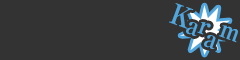
<style>
.page{position:relative;width:240px;height:60px;background:#333333}
.page>*{position:absolute;margin:0}
.t1{font:25.2px "RyuminPro-ExBold";letter-spacing:-0.08em;color:#50a6dd;scale:0.9 1}
.t2{font:28px "RyuminPro-ExBold";letter-spacing:-0.08em;color:#50a6dd;scale:0.9 1}
</style>
<div class="page">
<p class="t1" style="left:169px;top:3px;width:69px;height:46px;rotate:20deg"><span class="t2">K</span>aram</p>
</div>
